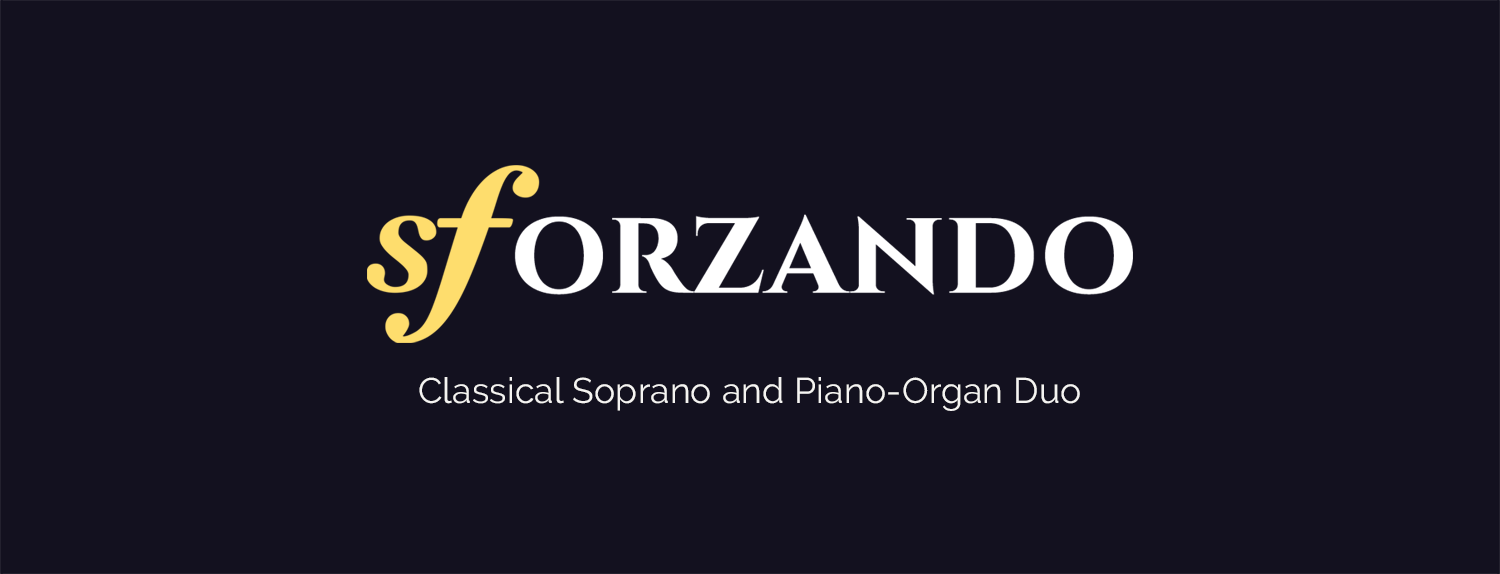
<style>
.page{position:relative;width:1500px;height:574px;background:#13111f}
.page>*{position:absolute;margin:0}
.t1{font:35.5px "Raleway-Regular";letter-spacing:0.01em;color:#f5f4f2}
</style>
<div class="page">
<p class="t1" style="left:419px;top:377px;width:661px;height:34px">Classical Soprano and Piano-Organ Duo</p>
</div>
